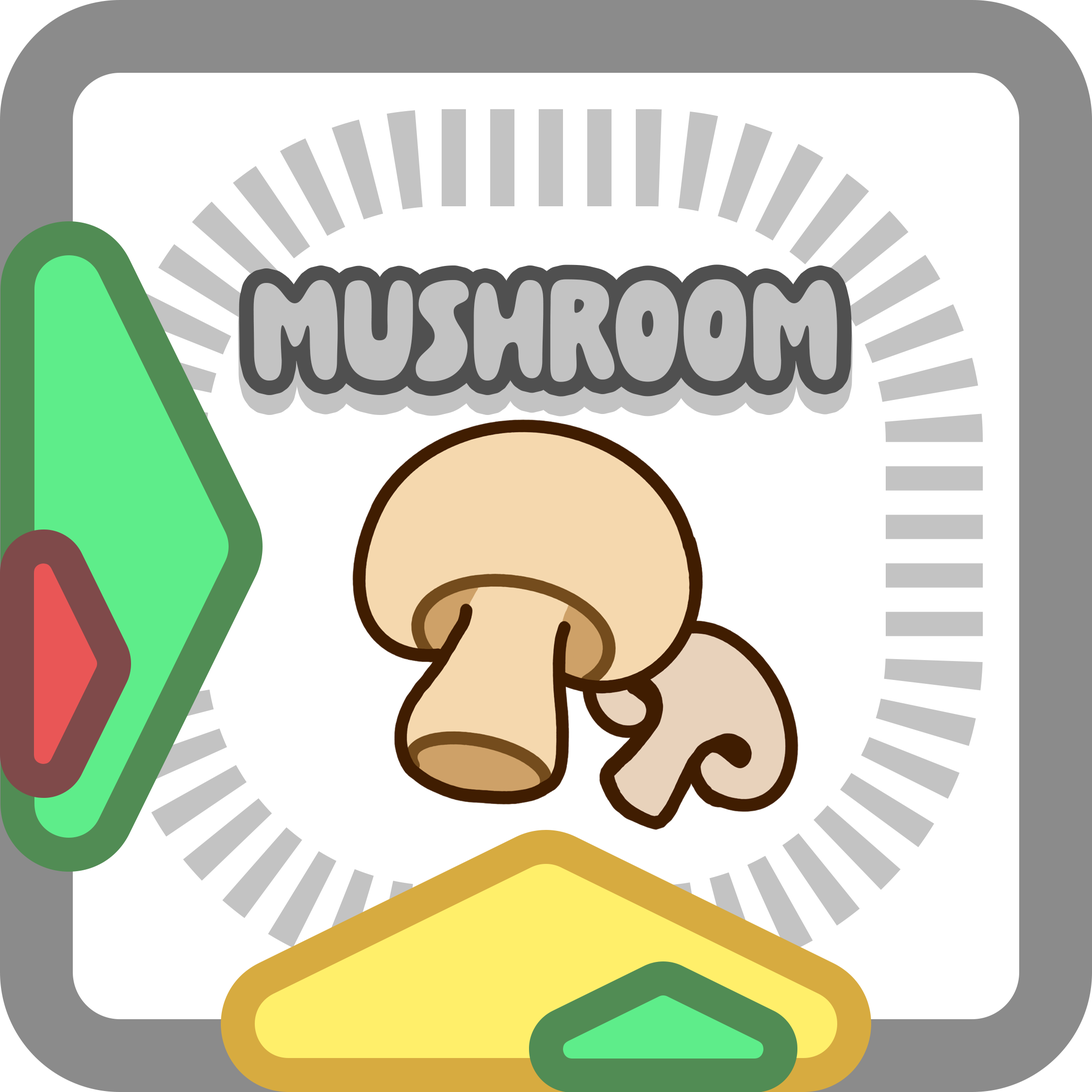
<style>
.page{position:relative;width:1092px;height:1092px;background:#ffffff}
.page>*{position:absolute;margin:0}
.t1{font:161.8px "PaindeMie-Regular";color:#c3c3c3}
</style>
<div class="page">
<p class="t1" style="left:253px;top:279px;width:584px;height:103px">Mushroom</p>
</div>
